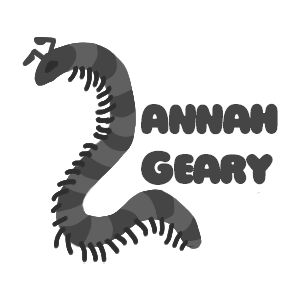
<style>
.page{position:relative;width:300px;height:300px;background:#ffffff}
.page>*{position:absolute;margin:0}
.t1{font:41.7px "Ziclets-Medium";color:#454545}
</style>
<div class="page">
<p class="t1" style="left:141px;top:103px;width:137px;height:82px">annah <br>Geary</p>
</div>
